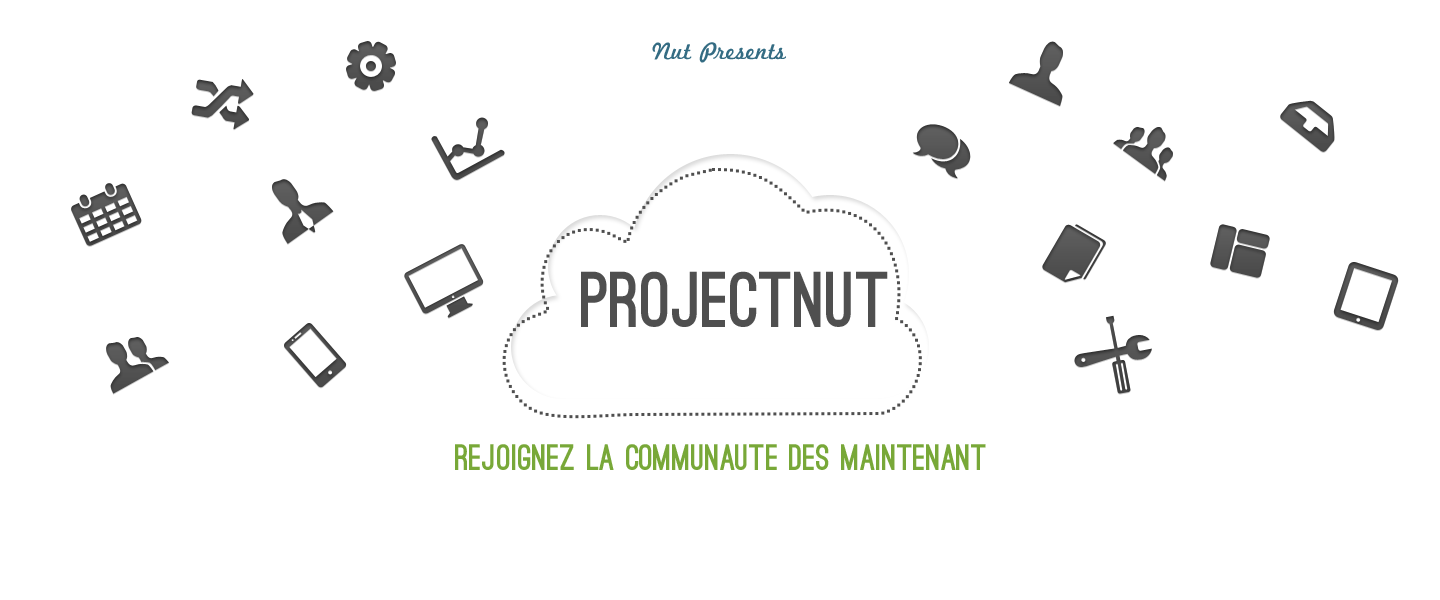
<style>
.page{position:relative;width:1440px;height:600px;background:#ffffff}
.page>*{position:absolute;margin:0}
.t1{font:25px "MarketingScript";color:#346c83}
.t2{font:75px "OstrichSans-Black";color:#4f4f4f}
.t3{font:35px "OstrichSans-Black";color:#78a838}
</style>
<div class="page">
<p class="t1" style="left:652px;top:42px;width:134px;height:21px">Nut Presents</p>
<p class="t2" style="left:581px;top:271px;width:307px;height:56px">ProjectNut</p>
<p class="t3" style="left:455px;top:444px;width:531px;height:26px">Rejoignez la communaute des maintenant</p>
</div>
